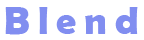
<style>
.page{position:relative;width:144px;height:40px;background:#ffffff}
.page>*{position:absolute;margin:0}
.t1{font:40px "BerlinSansFBDemi-Bold";letter-spacing:0.2em;color:#818ef0}
</style>
<div class="page">
<p class="t1" style="left:5px;top:7px;width:133px;height:28px">Blend</p>
</div>
